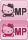
<style>
.page{position:relative;width:28px;height:40px}
.page>*{position:absolute;margin:0}
.t1{font:24px "MellowFonts1";color:#503640}
.t2{font:10px "ArialNarrow-Bold";color:#503640}
.t3{font:24px "MellowFonts1";color:#a32955}
.t4{font:10px "ArialNarrow-Bold";color:#a32955}
</style>
<div class="page">
<p class="t1" style="left:1px;top:3px;width:15px;height:14px">A</p>
<p class="t2" style="left:15px;top:8px;width:12px;height:8px">MP</p>
<p class="t3" style="left:1px;top:23px;width:15px;height:14px">A</p>
<p class="t4" style="left:15px;top:28px;width:12px;height:8px">MP</p>
</div>
